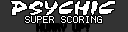
<style>
.page{position:relative;width:128px;height:32px;background:#333333}
.page>*{position:absolute;margin:0}
.t1{font:8px "Terminal";color:#ffffff}
.t2{font:8px "Terminal";color:#000000}
</style>
<div class="page">
<p class="t1" style="left:25px;top:16px;width:77px;height:7px">SUPER SCORING</p>
<p class="t2" style="left:37px;top:24px;width:52px;height:7px">HURRY UP!</p>
</div>
